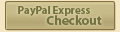
<style>
.page{position:relative;width:120px;height:32px}
.page>*{position:absolute;margin:0}
.t1{font:11px "MyriadPro-Bold";color:#73733f}
.t2{font:13px "MyriadPro-Bold";color:#73733f}
</style>
<div class="page">
<p class="t1" style="left:18px;top:6px;width:72px;height:10px">PayPal Express</p>
<p class="t2" style="left:46px;top:15px;width:56px;height:10px">Checkout</p>
</div>
